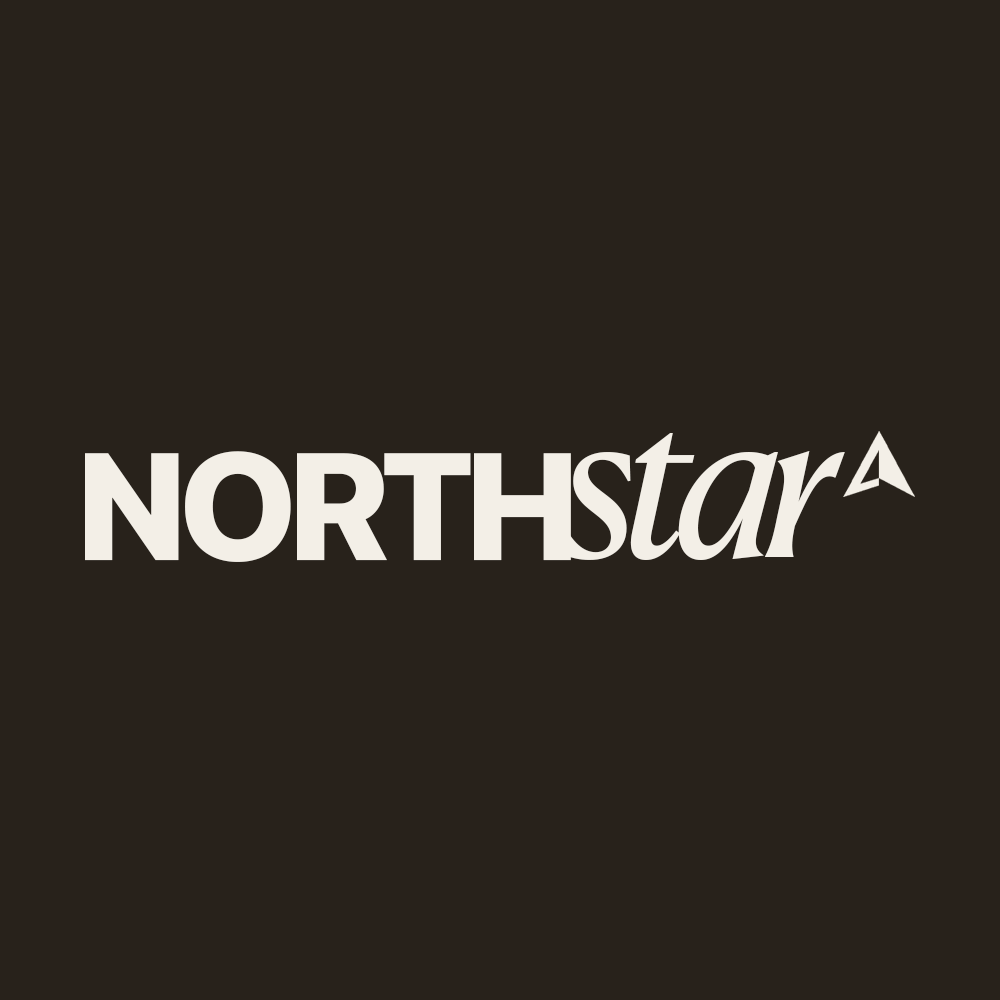
<style>
.page{position:relative;width:1000px;height:1000px;background:#28221b}
.page>*{position:absolute;margin:0}
.t1{font:201.2px "CanelaTextTrial-RegularItalic";letter-spacing:-0.06em;color:#f3efe7}
.t2{font:151.5px "SFProDisplay-Heavy";letter-spacing:-0.04em;color:#f3efe7}
</style>
<div class="page">
<p class="t1" style="left:560px;top:433px;width:285px;height:127px">star</p>
<p class="t2" style="left:85px;top:451px;width:486px;height:111px">NORTH</p>
</div>
